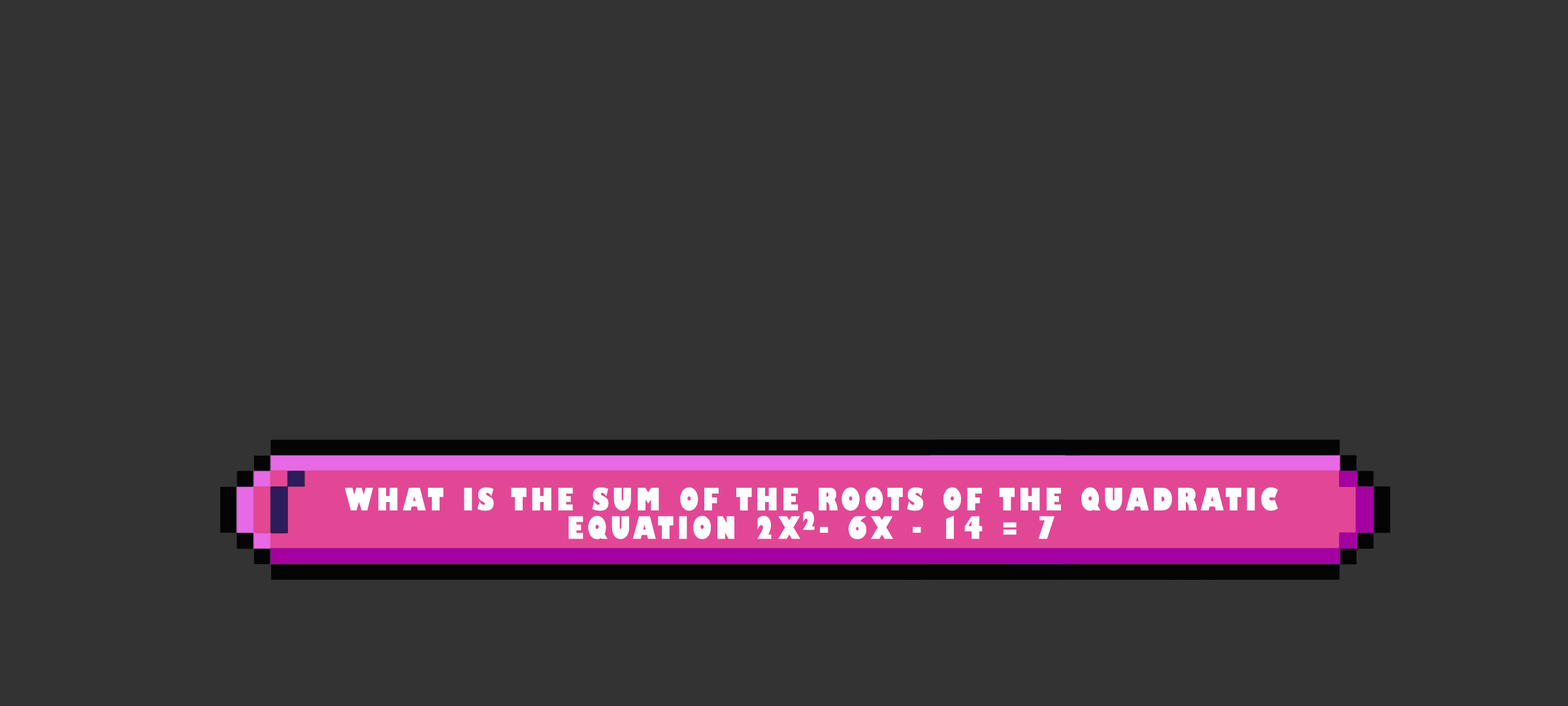
<style>
.page{position:relative;width:1568px;height:706px;background:#333333}
.page>*{position:absolute;margin:0}
.t1{font:30px/28.4px "GillSans-UltraBoldCondensed";letter-spacing:0.115em;color:#ffffff;text-transform:uppercase;scale:1.12 1}
.t2{font:24.5px "GillSans-UltraBoldCondensed";letter-spacing:0.115em;color:#ffffff;text-transform:uppercase;scale:1.12 1}
</style>
<div class="page">
<p class="t1" style="left:344px;top:487px;width:934px;height:52px;text-align:center">What is the sum of the roots of the quadratic equation 2x - 6x - 14 = 7</p>
<p class="t2" style="left:803px;top:510px;width:12px;height:20px">2</p>
</div>
